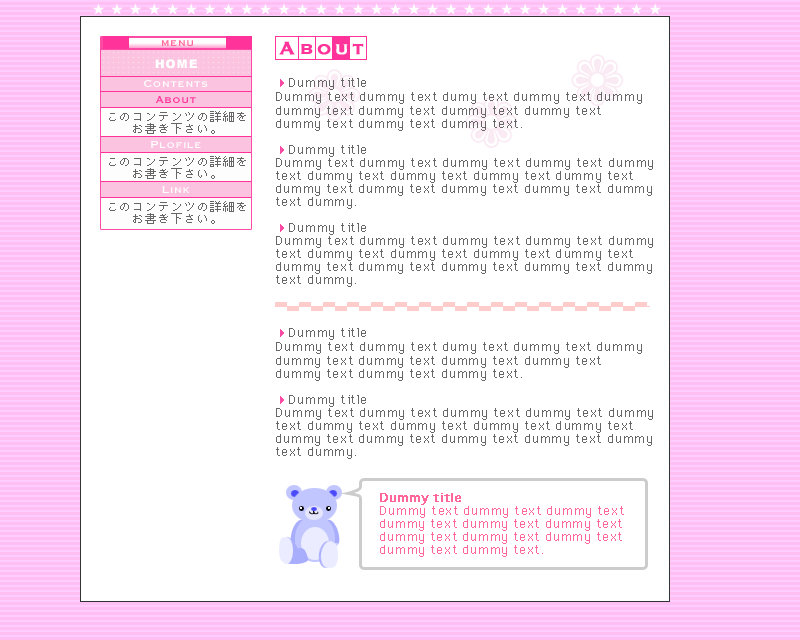
<style>
.page{position:relative;width:800px;height:640px;background:#ffffff}
.page>*{position:absolute;margin:0}
.t1{font:13px "Osaka";letter-spacing:0.075em;color:#ffffff}
.t2{font:13px "CopperplateCondSCapsSSK";letter-spacing:0.075em;color:#ff6699}
.t3{font:23px "CopperplateCondSCapsSSK";letter-spacing:0.26em;color:#ff3399;font-weight:bold}
.t4{font:23px "CopperplateCondSCapsSSK";letter-spacing:0.16em;color:#ff3399;font-weight:bold}
.t5{font:23px "CopperplateCondSCapsSSK";letter-spacing:0.14em;color:#ff3399;font-weight:bold}
.t6{font:23px "CopperplateCondSCapsSSK";letter-spacing:0.16em;color:#ffffff;font-weight:bold}
.t7{font:12px "Arial-Black";letter-spacing:0.075em;color:#feffff}
.t8{font:12px/13px "Osaka";letter-spacing:0.075em;color:#666666}
.t9{font:12px/13px "Webdings";letter-spacing:0.075em;color:#fc4ba4}
.t10{font:12px/11px "Osaka";letter-spacing:0.075em;color:#666666}
.t11{font:12px/14px "Osaka";letter-spacing:0.075em;color:#666666}
.t12{font:12px/12px "Osaka";letter-spacing:0.075em;color:#666666}
.t13{font:12px/13px "Osaka";letter-spacing:0.075em;color:#ff6699}
.t14{font:12px/13px "Osaka";letter-spacing:0.075em;color:#ff6699;font-weight:bold}
</style>
<div class="page">
<p class="t1" style="left:92px;top:3px;width:569px;height:12px">★ ★ ★ ★ ★ ★ ★ ★ ★ ★ ★ ★ ★ ★ ★ ★ ★ ★ ★ ★ ★ ★ ★ ★ ★ ★ ★ ★ ★ ★ ★</p>
<p class="t2" style="left:161px;top:40px;width:33px;height:6px">menu</p>
<p class="t3" style="left:279px;top:41px;width:85px;height:14px">A<span class="t4">b</span><span class="t5">o</span><span class="t6">u</span><span class="t4">t</span></p>
<p class="t7" style="left:155px;top:59px;width:42px;height:10px">HOME</p>
<p class="t8" style="left:276px;top:78px;width:377px;height:209px"><span class="t9">4</span><span class="t10">Dummy title<br></span><span class="t11">Dummy text dummy text dumy text dummy text dummy<br>dummy </span>text dummy text dummy text dummy text<br>dummy text dummy text dummy text.<br><br><span class="t9">4</span>Dummy title<br>Dummy text dummy text dummy text dummy text dummy<br>text dummy text dummy text dummy text dummy text<br>dummy text dummy text dummy text dummy text dummy<br>text dummy.<br><br><span class="t9">4</span>Dummy title<br>Dummy text dummy text dummy text dummy text dummy<br>text dummy text dummy text dummy text dummy text<br>dummy text dummy text dummy text dummy text dummy<br>text dummy.</p>
<p class="t12" style="left:109px;top:111px;width:137px;height:23px;text-align:center">このコンテンツの詳細を<br>お書き下さい。</p>
<p class="t12" style="left:109px;top:156px;width:137px;height:23px;text-align:center">このコンテンツの詳細を<br>お書き下さい。</p>
<p class="t12" style="left:109px;top:201px;width:137px;height:23px;text-align:center">このコンテンツの詳細を<br>お書き下さい。</p>
<p class="t8" style="left:276px;top:328px;width:377px;height:131px"><span class="t9">4</span><span class="t10">Dummy title<br></span><span class="t11">Dummy text dummy text dumy text dummy text dummy<br>dummy </span>text dummy text dummy text dummy text<br>dummy text dummy text dummy text.<br><br><span class="t9">4</span>Dummy title<br>Dummy text dummy text dummy text dummy text dummy<br>text dummy text dummy text dummy text dummy text<br>dummy text dummy text dummy text dummy text dummy<br>text dummy.</p>
<p class="t13" style="left:380px;top:493px;width:244px;height:64px"><span class="t14">Dummy title<br></span>Dummy text dummy text dummy text<br>dummy text dummy text dummy text<br>dummy text dummy text dummy text<br>dummy text dummy text.</p>
</div>
